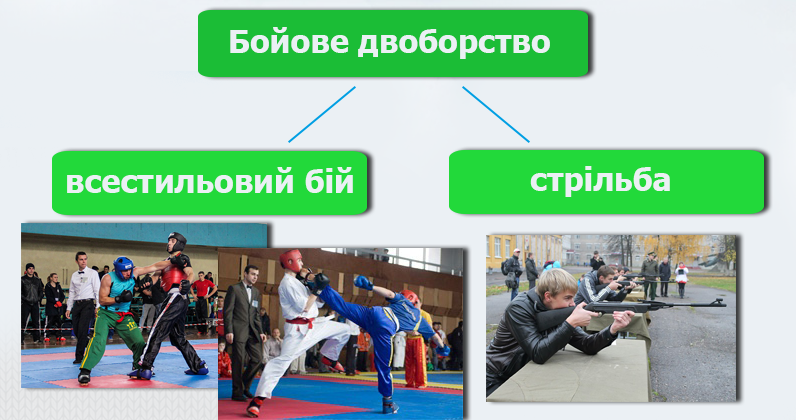
<style>
.page{position:relative;width:796px;height:420px;background:#ebf0f4}
.page>*{position:absolute;margin:0}
.t1{font:32px "Tahoma-Bold";color:#ebf0f4}
</style>
<div class="page">
<p class="t1" style="left:230px;top:27px;width:320px;height:32px">Бойове двоборство</p>
<p class="t1" style="left:67px;top:167px;width:286px;height:26px">всестильовий бій</p>
<p class="t1" style="left:530px;top:166px;width:140px;height:31px">стрільба</p>
</div>
